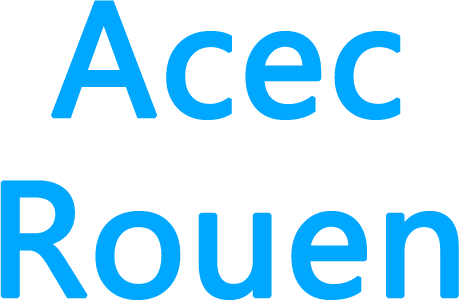
<style>
.page{position:relative;width:459px;height:300px;background:#ffffff}
.page>*{position:absolute;margin:0}
.t1{font:150px/180px "MicrosoftYaHei";color:#00a8ff;font-weight:bold}
</style>
<div class="page">
<p class="t1" style="left:0px;top:0px;width:459px;height:300px;text-align:center">Acec<br>Rouen</p>
</div>
